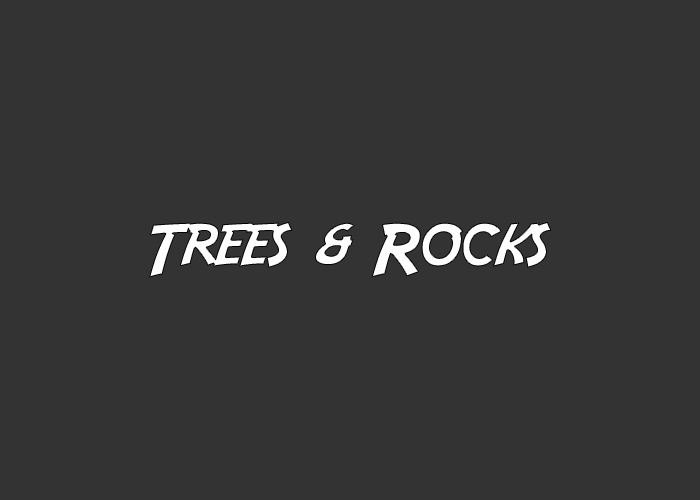
<style>
.page{position:relative;width:700px;height:500px;background:#333333}
.page>*{position:absolute;margin:0}
.t1{font:73px "Adventure";color:#fffefe}
</style>
<div class="page">
<p class="t1" style="left:149px;top:222px;width:403px;height:56px">Trees &amp; Rocks</p>
</div>
